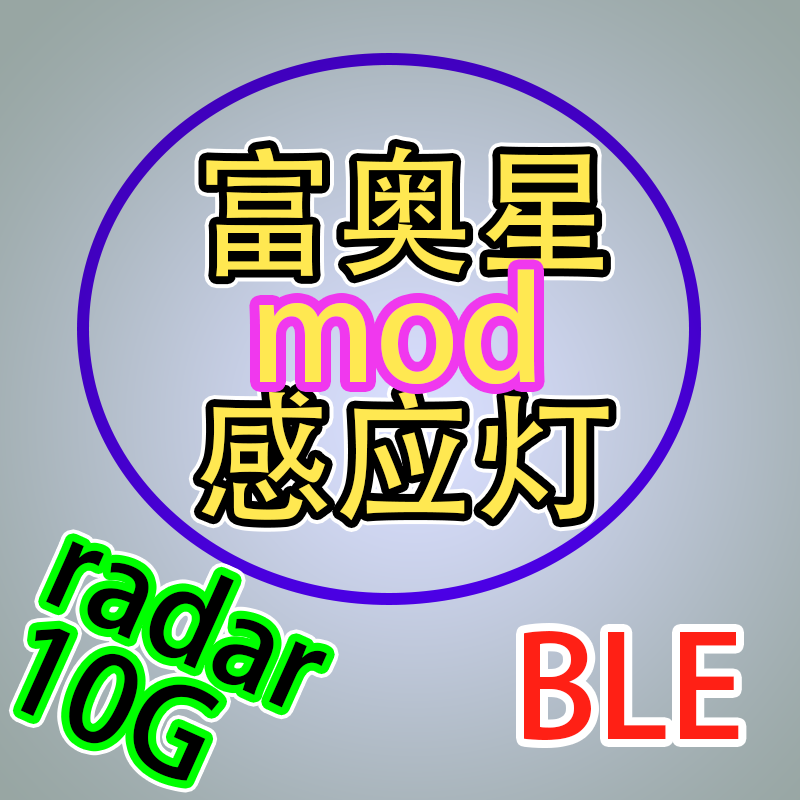
<style>
.page{position:relative;width:800px;height:800px}
.page>*{position:absolute;margin:0}
.t1{font:140px "AdobeHeitiStd-Regular";color:#ffe851}
.t2{font:120px/110px "AdobeHeitiStd-Regular";color:#000000}
.t3{font:140px "AdobeHeitiStd-Regular";color:#ff2015}
</style>
<div class="page">
<p class="t1" style="left:200px;top:146px;width:409px;height:375px">富奥星<br>感应灯</p>
<p class="t1" style="left:259px;top:269px;width:276px;height:116px">mod</p>
<p class="t2" style="left:20px;top:541px;width:307px;height:240px;rotate:24deg">radar<br>10G</p>
<p class="t3" style="left:524px;top:631px;width:215px;height:109px">BLE</p>
</div>
